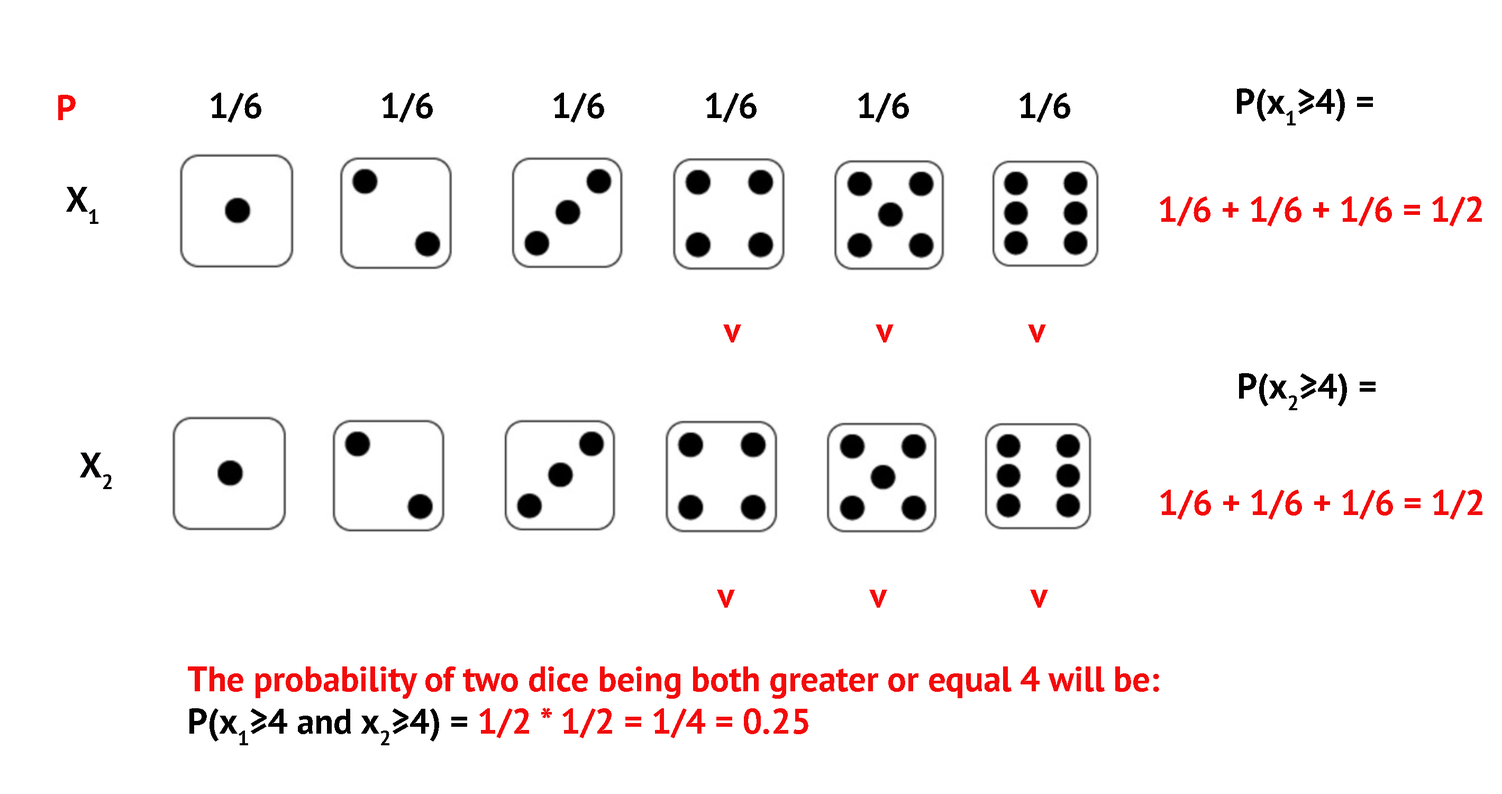
<style>
.page{position:relative;width:1502px;height:794px;background:#ffffff}
.page>*{position:absolute;margin:0}
.t1{font:35.3px "PTSans-Bold";color:#010101}
.t2{font:35.3px "PTSans-Bold";color:#f60808}
.t3{font:35.3px "PTSans-Bold";color:#000000}
.t4{font:35.3px "PTSans-Bold";color:#020000}
.t5{font:35.3px "PTSans-Bold";color:#f30b0b}
.t6{font:35.3px "PTSans-Bold";color:#040000}
.t7{font:35.3px "PTSans-Bold";color:#f60a0a}
</style>
<div class="page">
<p class="t1" style="left:1237px;top:88px;width:136px;height:37px">P(x1≥4) =</p>
<p class="t2" style="left:58px;top:95px;width:18px;height:25px">P</p>
<p class="t3" style="left:211px;top:93px;width:859px;height:30px">1/6       1/6       1/6      1/6      1/6       1/6</p>
<p class="t4" style="left:66px;top:187px;width:32px;height:37px">X1</p>
<p class="t5" style="left:1160px;top:196px;width:322px;height:30px">1/6 + 1/6 + 1/6 = 1/2</p>
<p class="t5" style="left:723px;top:324px;width:323px;height:18px">v        v        v</p>
<p class="t1" style="left:1239px;top:373px;width:137px;height:37px">P(x2≥4) =</p>
<p class="t6" style="left:80px;top:452px;width:32px;height:37px">X2</p>
<p class="t5" style="left:1160px;top:489px;width:323px;height:31px">1/6 + 1/6 + 1/6 = 1/2</p>
<p class="t7" style="left:717px;top:589px;width:331px;height:18px">v        v         v</p>
<p class="t5" style="left:188px;top:666px;width:971px;height:79px">The probability of two dice being both greater or equal 4 will be: <br><span class="t1">P(x1≥4 and x2≥4) = </span>1/2 * 1/2 = 1/4 = 0.25</p>
</div>
